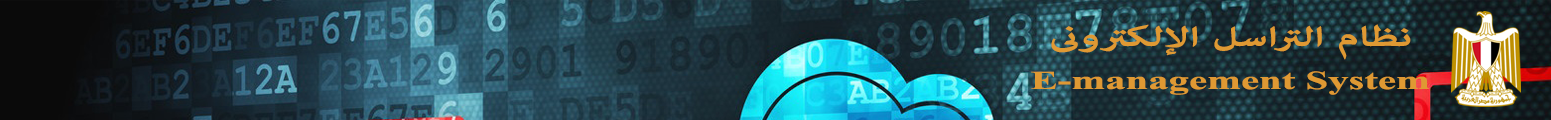
<style>
.page{position:relative;width:1551px;height:120px}
.page>*{position:absolute;margin:0}
.t1{font:40px "AdobeArabic-Bold";color:#df9933;scale:1.57 1}
.t2{font:26px "TimesNewRomanPS-BoldMT";color:#df9933;scale:1.57 1}
</style>
<div class="page">
<p class="t1" style="left:1051px;top:24px;width:360px;height:36px">نظام التراسل الإلكترونى</p>
<p class="t2" style="left:1031px;top:71px;width:398px;height:24px">E-management System</p>
</div>
